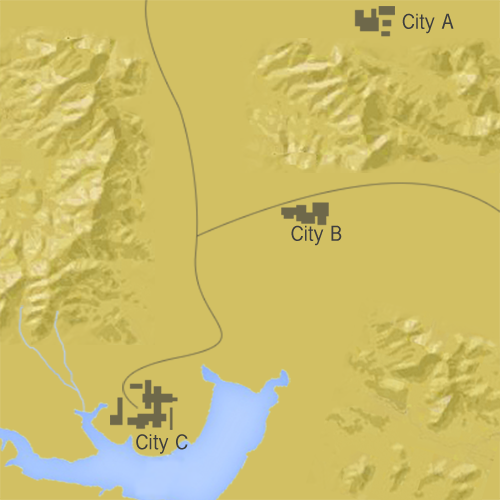
<style>
.page{position:relative;width:500px;height:500px;background:#d2c063}
.page>*{position:absolute;margin:0}
.t1{font:22.5px "InaiMathi";color:#3e3e3e}
</style>
<div class="page">
<p class="t1" style="left:402px;top:13px;width:52px;height:21px">City A</p>
<p class="t1" style="left:291px;top:225px;width:51px;height:21px">City B</p>
<p class="t1" style="left:136px;top:434px;width:52px;height:20px">City C</p>
</div>
